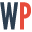
<style>
.page{position:relative;width:32px;height:32px;background:#ffffff}
.page>*{position:absolute;margin:0}
.t1{font:37px "LeagueGothic-Regular";color:#2c3e50}
.t2{font:37px "LeagueGothic-Regular";color:#e74c3c}
</style>
<div class="page">
<p class="t1" style="left:0px;top:2px;width:31px;height:28px">W<span class="t2">P</span></p>
</div>
